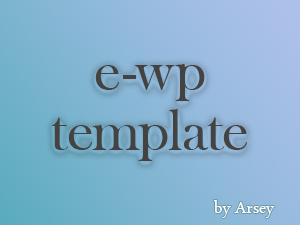
<style>
.page{position:relative;width:300px;height:225px}
.page>*{position:absolute;margin:0}
.t1{font:60px/20px "BaskOldFace";color:#444342}
.t2{font:24px "ArabicTypesetting";color:#fefefe}
</style>
<div class="page">
<p class="t1" style="left:51px;top:64px;width:196px;height:97px;text-align:center">e-wp<br><br><br>template</p>
<p class="t2" style="left:213px;top:200px;width:62px;height:18px">by Arsey</p>
</div>
